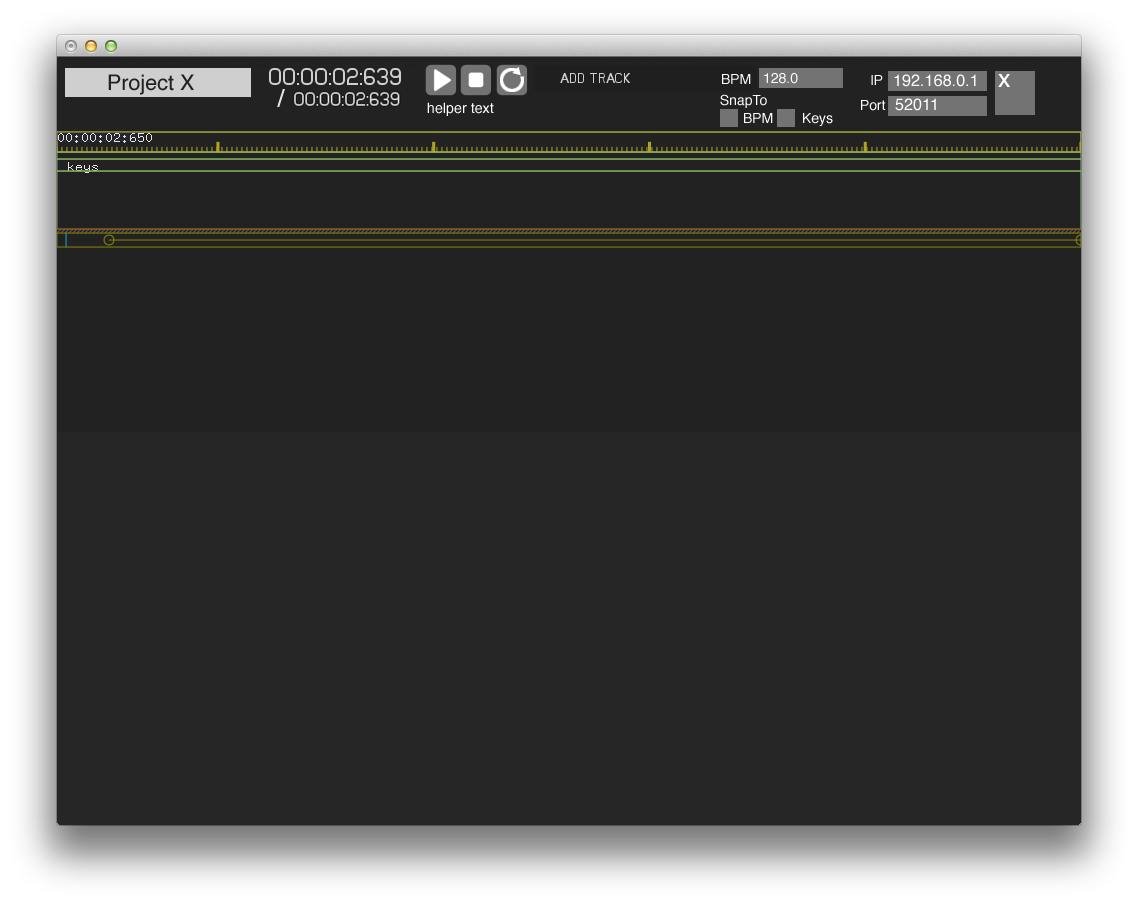
<style>
.page{position:relative;width:1138px;height:904px;background:#262626}
.page>*{position:absolute;margin:0}
.t1{font:21.5px "Helvetica";color:#222222}
.t2{font:13.9px "Helvetica";color:#ffffff}
.t3{font:16.2px "Helvetica";color:#ffffff}
.t4{font:25px "Helvetica";color:#ffffff}
.t5{font:25px "Helvetica";color:#e7e7e7}
.t6{font:14.3px "Helvetica";color:#ffffff}
</style>
<div class="page">
<p class="t1" style="left:108px;top:74px;width:86px;height:21px">Project X</p>
<p class="t2" style="left:722px;top:74px;width:29px;height:10px">BPM</p>
<p class="t2" style="left:764px;top:73px;width:34px;height:11px">128.0</p>
<p class="t2" style="left:871px;top:75px;width:12px;height:10px">IP</p>
<p class="t3" style="left:894px;top:74px;width:82px;height:13px">192.168.0.1</p>
<p class="t4" style="left:998px;top:74px;width:12px;height:13px">x</p>
<p class="t5" style="left:277px;top:89px;width:8px;height:18px">/</p>
<p class="t6" style="left:427px;top:102px;width:67px;height:14px">helper text</p>
<p class="t2" style="left:720px;top:94px;width:47px;height:14px">SnapTo</p>
<p class="t2" style="left:861px;top:100px;width:25px;height:11px">Port</p>
<p class="t3" style="left:895px;top:98px;width:41px;height:13px">52011</p>
<p class="t2" style="left:744px;top:113px;width:29px;height:10px">BPM</p>
<p class="t2" style="left:803px;top:113px;width:30px;height:13px">Keys</p>
</div>
